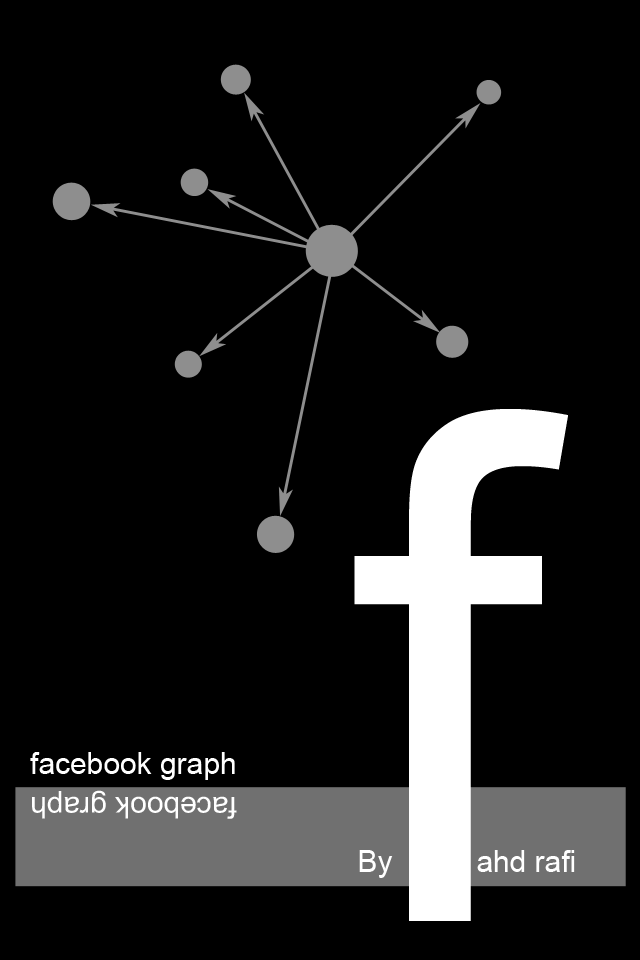
<style>
.page{position:relative;width:640px;height:960px;background:#000000}
.page>*{position:absolute;margin:0}
.t1{font:704px "ArialMT";color:#ffffff}
.t2{font:30px "ArialMT";color:#ffffff}
</style>
<div class="page">
<p class="t1" style="left:354px;top:409px;width:214px;height:512px">f</p>
<p class="t2" style="left:30px;top:752px;width:205px;height:28px">facebook graph</p>
<p class="t2" style="left:32px;top:790px;width:205px;height:29px;rotate:180deg">facebook graph</p>
<p class="t2" style="left:359px;top:850px;width:34px;height:28px">By</p>
<p class="t2" style="left:477px;top:850px;width:98px;height:22px">ahd rafi</p>
</div>
